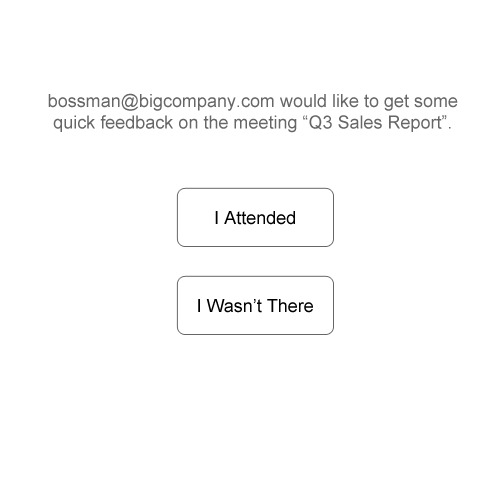
<style>
.page{position:relative;width:500px;height:500px;background:#ffffff}
.page>*{position:absolute;margin:0}
.t1{font:18px "ArialMT";color:#666666}
.t2{font:18px "ArialMT";color:#000000}
</style>
<div class="page">
<p class="t1" style="left:48px;top:93px;width:410px;height:40px;text-align:center">bossman@bigcompany.com would like to get some quick feedback on the meeting “Q3 Sales Report”.</p>
<p class="t2" style="left:215px;top:211px;width:80px;height:14px">I Attended</p>
<p class="t2" style="left:198px;top:299px;width:115px;height:14px">I Wasn’t There</p>
</div>
